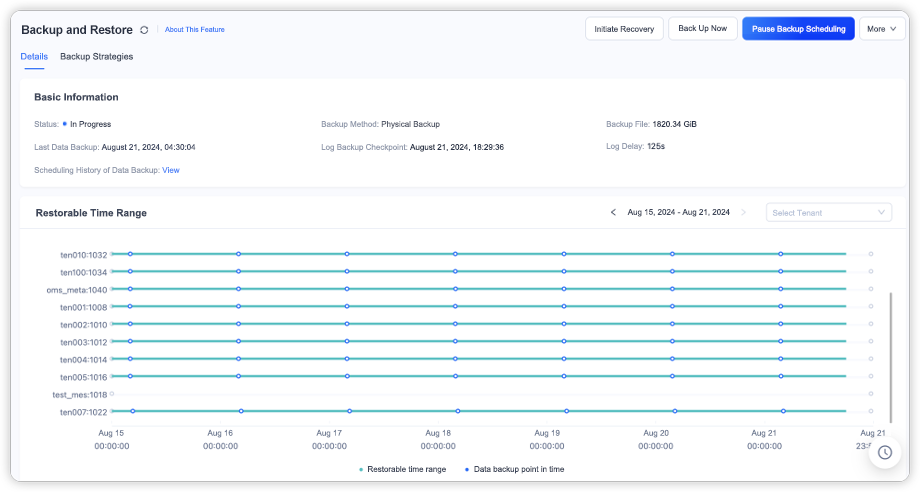
<style>
.page{position:relative;width:920px;height:492px;background:#ffffff}
.page>*{position:absolute;margin:0}
.t1{font:12px "Arial-BoldMT";letter-spacing:-0.02em;color:#272f41}
.t2{font:7px "ArialMT";color:#467ff7}
.t3{font:8px "ArialMT";color:#3f485b}
.t4{font:8px "ArialMT";color:#fefefe}
.t5{font:9px "ArialMT";color:#467ff7}
.t6{font:9px "ArialMT";color:#3f485b}
.t7{font:10px "Arial-BoldMT";color:#3f485b}
.t8{font:8px "ArialMT";color:#949cae}
.t9{font:8px "ArialMT";color:#595f6e}
.t10{font:8px "ArialMT";color:#2e374c}
.t11{font:8px "ArialMT";color:#434d66}
.t12{font:8px "ArialMT";color:#2b354a}
.t13{font:8px "ArialMT";color:#588bf7}
.t14{font:8px "ArialMT";color:#bac4d9}
.t15{font:8px "ArialMT";color:#737f96}
</style>
<div class="page">
<p class="t1" style="left:22px;top:25px;width:111px;height:12px">Backup and Restore</p>
<p class="t2" style="left:165px;top:26px;width:60px;height:6px">About This Feature</p>
<p class="t3" style="left:595px;top:26px;width:60px;height:8px">Initiate Recovery</p>
<p class="t3" style="left:679px;top:25px;width:48px;height:8px">Back Up Now</p>
<p class="t4" style="left:752px;top:25px;width:94px;height:9px">Pause Backup Scheduling</p>
<p class="t3" style="left:867px;top:25px;width:19px;height:7px">More</p>
<p class="t5" style="left:21px;top:53px;width:27px;height:7px">Details</p>
<p class="t6" style="left:60px;top:52px;width:73px;height:10px">Backup Strategies</p>
<p class="t7" style="left:34px;top:93px;width:84px;height:8px">Basic Information</p>
<p class="t3" style="left:34px;top:121px;width:77px;height:8px"><span class="t8">Status:     </span>In Progress</p>
<p class="t9" style="left:321px;top:121px;width:119px;height:8px"><span class="t8">Backup Method: </span>Physical Backup</p>
<p class="t8" style="left:606px;top:121px;width:91px;height:8px">Backup File: <span class="t10">1820.34 GiB</span></p>
<p class="t11" style="left:34px;top:144px;width:162px;height:8px"><span class="t8">Last Data Backup: </span>August 21, 2024, 04:30:04</p>
<p class="t12" style="left:321px;top:144px;width:183px;height:8px"><span class="t8">Log Backup Checkpoint: </span>August 21, 2024, 18:29:36</p>
<p class="t8" style="left:606px;top:143px;width:38px;height:8px">Log Delay:</p>
<p class="t8" style="left:34px;top:167px;width:146px;height:8px">Scheduling History of Data Backup: <span class="t13">View</span></p>
<p class="t7" style="left:36px;top:209px;width:111px;height:10px">Restorable Time Range</p>
<p class="t3" style="left:627px;top:209px;width:103px;height:8px">Aug 15, 2024 - Aug 21, 2024</p>
<p class="t14" style="left:772px;top:209px;width:50px;height:7px">Select Tenant</p>
<p class="t15" style="left:98px;top:429px;width:26px;height:9px">Aug 15</p>
<p class="t15" style="left:207px;top:429px;width:26px;height:9px">Aug 16</p>
<p class="t15" style="left:316px;top:429px;width:26px;height:9px">Aug 17</p>
<p class="t15" style="left:425px;top:429px;width:26px;height:9px">Aug 18</p>
<p class="t15" style="left:534px;top:429px;width:26px;height:9px">Aug 19</p>
<p class="t15" style="left:643px;top:429px;width:26px;height:9px">Aug 20</p>
<p class="t15" style="left:751px;top:429px;width:25px;height:9px">Aug 21</p>
<p class="t15" style="left:860px;top:429px;width:25px;height:9px">Aug 21</p>
<p class="t3" style="left:368px;top:466px;width:78px;height:8px">Restorable time range</p>
<p class="t3" style="left:474px;top:466px;width:91px;height:8px">Data backup point in time</p>
</div>
